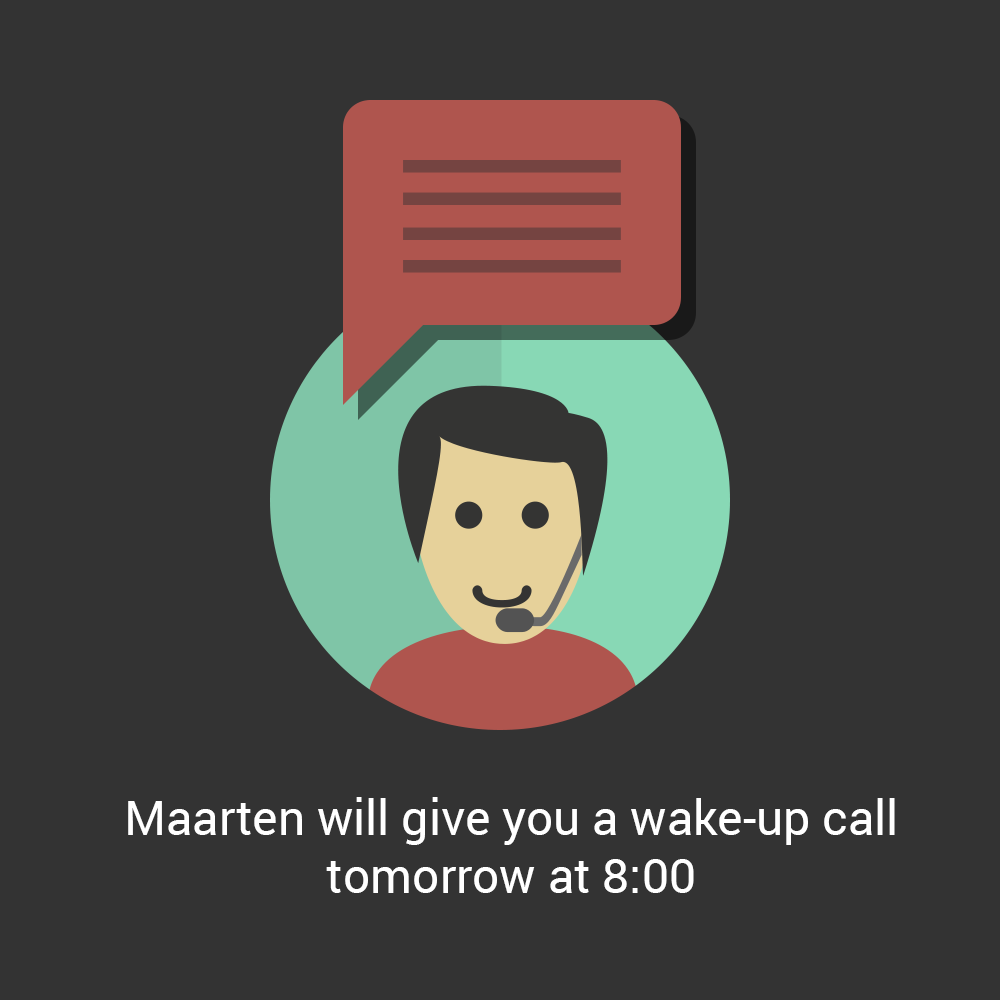
<style>
.page{position:relative;width:1000px;height:1000px;background:#333333}
.page>*{position:absolute;margin:0}
.t1{font:48px "Roboto-Regular";color:#ffffff}
</style>
<div class="page">
<p class="t1" style="left:128px;top:797px;width:767px;height:96px;text-align:center">Maarten will give you a wake-up call<br>tomorrow at 8:00</p>
</div>
